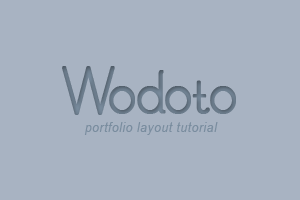
<style>
.page{position:relative;width:300px;height:200px;background:#a8b3c2}
.page>*{position:absolute;margin:0}
.t1{font:66px "SouciSans";color:#697989;font-weight:bold;scale:0.91 1}
.t2{font:13.2px "Arial-ItalicMT";letter-spacing:0.05em;color:#7a8d9f;scale:0.91 1}
</style>
<div class="page">
<p class="t1" style="left:62px;top:66px;width:174px;height:49px">Wodoto</p>
<p class="t2" style="left:84px;top:122px;width:134px;height:13px">portfolio layout tutorial</p>
</div>
